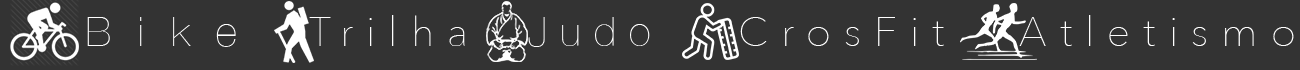
<style>
.page{position:relative;width:1300px;height:70px;background:#333333}
.page>*{position:absolute;margin:0}
.t1{font:41.4px "HelveticaNeue-UltraLight";letter-spacing:0.65em;color:#ffffff}
.t2{font:41.4px "AvenirNext-UltraLight";letter-spacing:0.31em;color:#ffffff}
.t3{font:41.4px "HelveticaNeue-UltraLight";letter-spacing:0.31em;color:#ffffff}
</style>
<div class="page">
<p class="t1" style="left:87px;top:17px;width:149px;height:30px">Bike</p>
<p class="t2" style="left:309px;top:15px;width:156px;height:31px">Trilha</p>
<p class="t3" style="left:528px;top:17px;width:122px;height:30px">Judo</p>
<p class="t2" style="left:740px;top:17px;width:204px;height:29px">CrosFit</p>
<p class="t2" style="left:1019px;top:15px;width:275px;height:31px">Atletismo</p>
</div>
